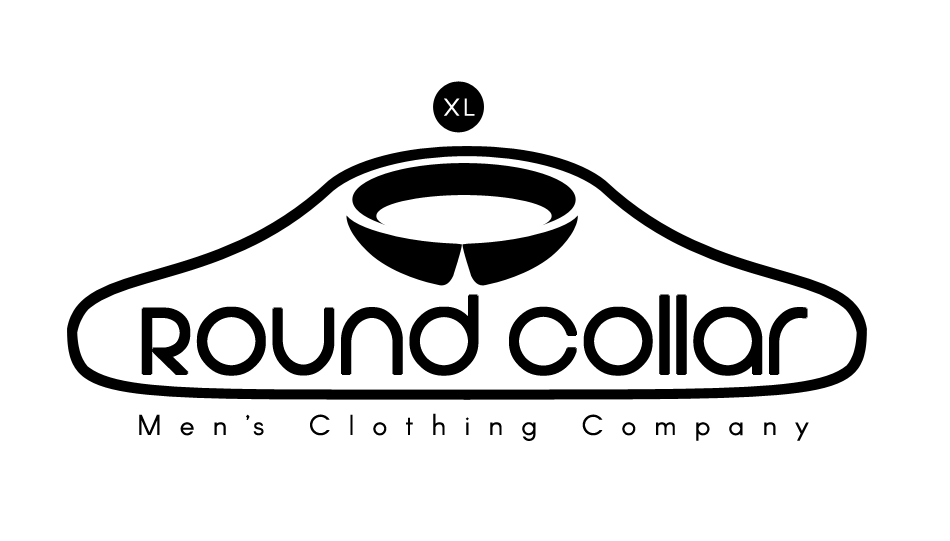
<style>
.page{position:relative;width:950px;height:541px;background:#ffffff}
.page>*{position:absolute;margin:0}
.t1{font:24px "Arcon-Regular";letter-spacing:0.1em;color:#ffffff}
.t2{font:87.6px "Vonique92";letter-spacing:0.075em;color:#000000}
.t3{font:28px "Arcon-Regular";letter-spacing:0.65em;color:#000000}
.t4{font:28px "Arcon-Regular";letter-spacing:0.06em;color:#000000}
</style>
<div class="page">
<p class="t1" style="left:444px;top:98px;width:31px;height:18px">XL</p>
<p class="t2" style="left:143px;top:296px;width:663px;height:78px">Round Collar</p>
<p class="t3" style="left:139px;top:413px;width:670px;height:28px">Men<span class="t4">’</span>s Clothing Company</p>
</div>
